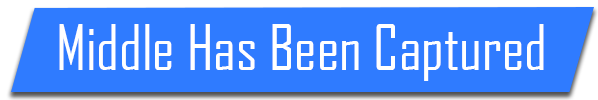
<style>
.page{position:relative;width:598px;height:100px;background:#2f7bff}
.page>*{position:absolute;margin:0}
.t1{font:60px "AgencyFB-Reg";color:#ffffff}
</style>
<div class="page">
<p class="t1" style="left:59px;top:24px;width:485px;height:57px">Middle Has Been Captured</p>
</div>
